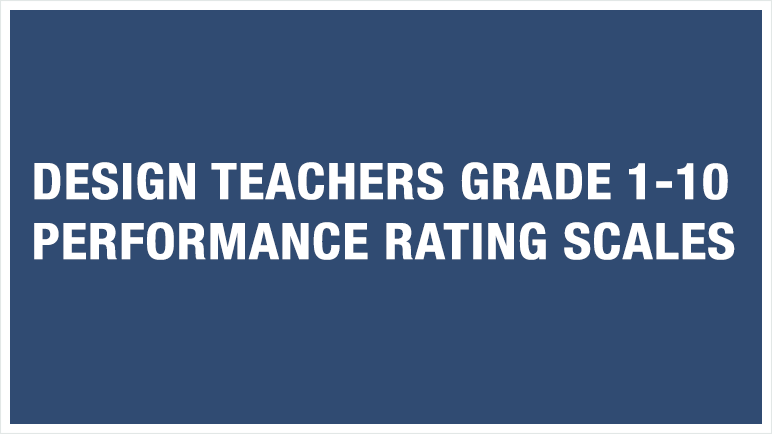
<style>
.page{position:relative;width:772px;height:434px;background:#304b72}
.page>*{position:absolute;margin:0}
.t1{font:50px "HelveticaNeue-CondensedBold";color:#ffffff;font-weight:bold;scale:1.07 1}
</style>
<div class="page">
<p class="t1" style="left:34px;top:162px;width:701px;height:98px">DESIGN TEACHERS GRADE 1-10<br>PERFORMANCE RATING SCALES</p>
</div>
